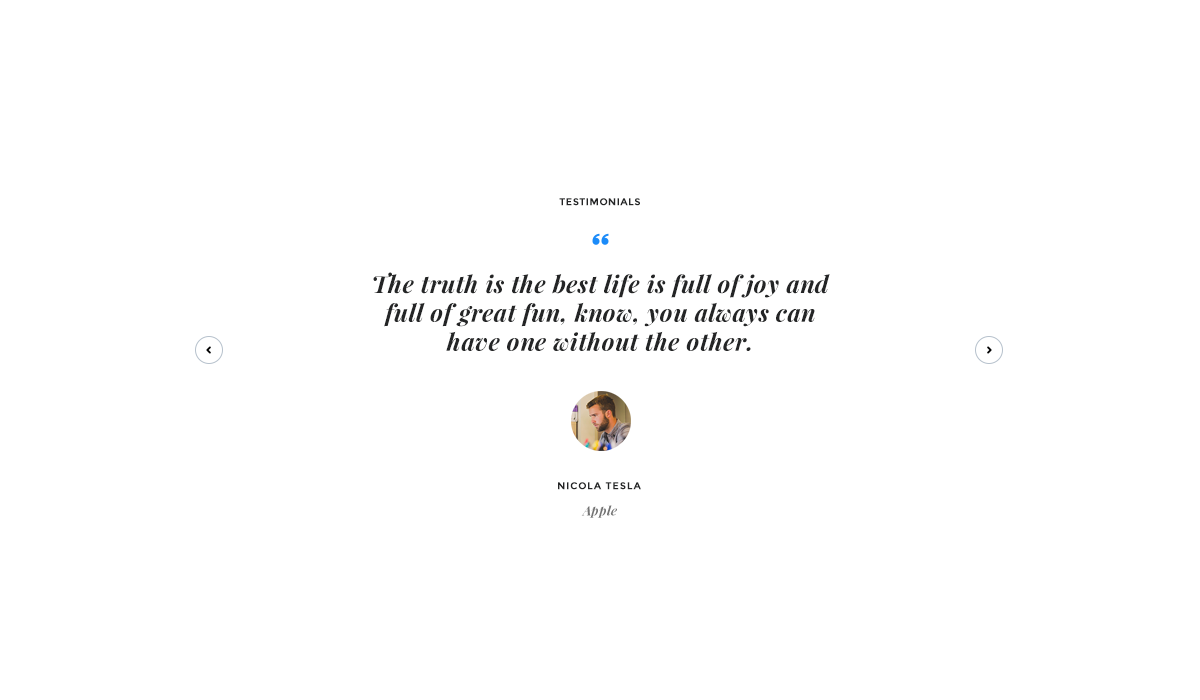
<style>
.page{position:relative;width:1200px;height:700px;background:#ffffff}
.page>*{position:absolute;margin:0}
.t1{font:10px "Montserrat-Bold";letter-spacing:0.04em;color:#242526;text-transform:uppercase}
.t2{font:24px "PlayfairDisplay-BoldItalic";letter-spacing:0.025em;color:#242526}
.t3{font:10px "Montserrat-Bold";letter-spacing:0.08em;color:#242526;text-transform:uppercase}
.t4{font:13px "PlayfairDisplay-BoldItalic";color:#747474}
</style>
<div class="page">
<p class="t1" style="left:559px;top:198px;width:81px;height:8px">testimonials</p>
<p class="t2" style="left:373px;top:272px;width:457px;height:79px;text-align:center">The truth is the best life is full of joy and full of great fun, know, you always can have one without the other.</p>
<p class="t3" style="left:558px;top:482px;width:83px;height:8px">nicola tesla</p>
<p class="t4" style="left:581px;top:505px;width:36px;height:13px">Apple</p>
</div>
